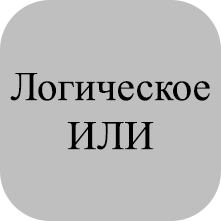
<style>
.page{position:relative;width:221px;height:221px;background:#bfbfbf}
.page>*{position:absolute;margin:0}
.t1{font:40.9px "TimesNewRomanPSMT";color:#000000}
</style>
<div class="page">
<p class="t1" style="left:10px;top:73px;width:200px;height:77px;text-align:center">Логическое<br>ИЛИ</p>
</div>
